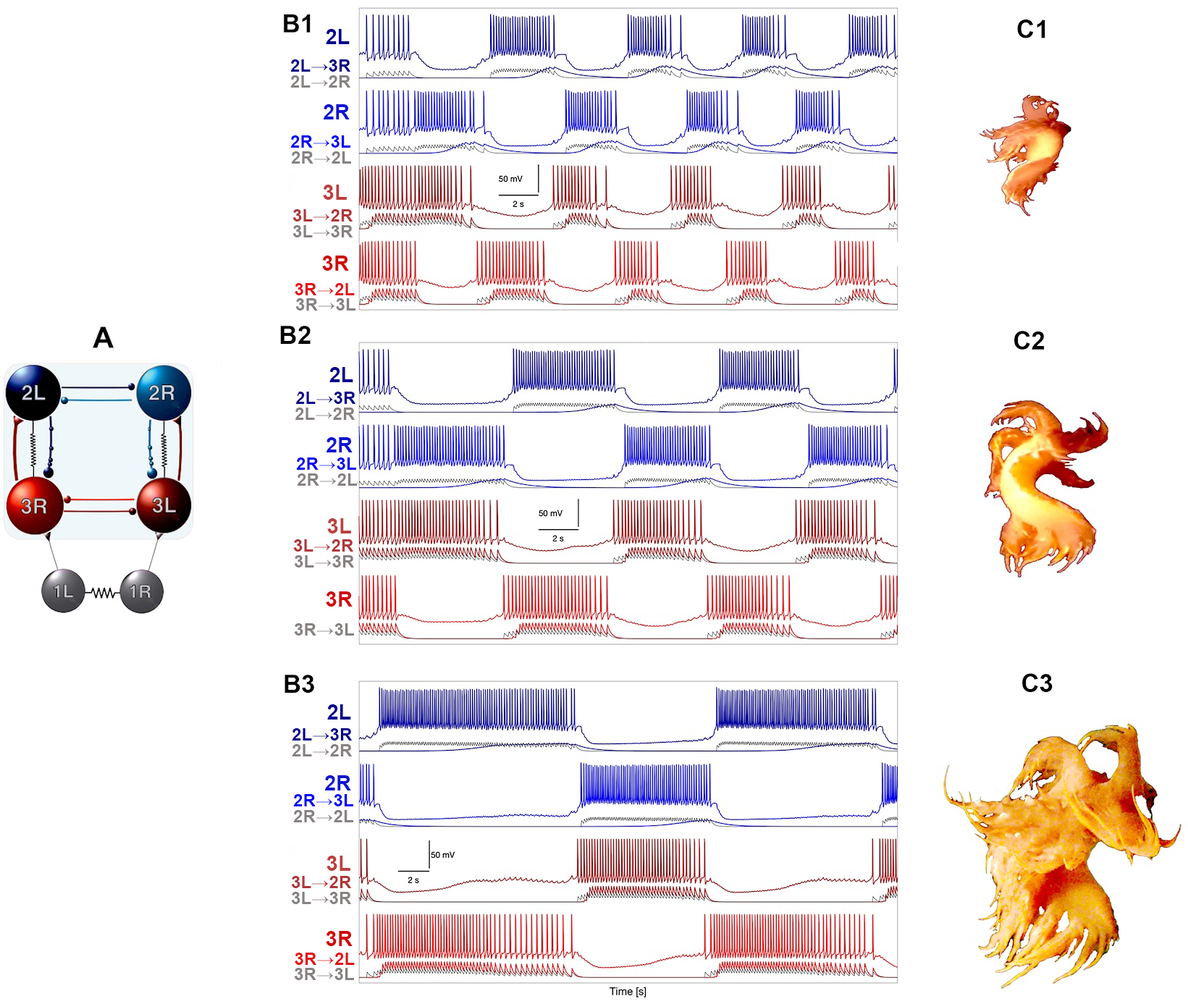
<style>
.page{position:relative;width:1188px;height:1004px;background:#ffffff}
.page>*{position:absolute;margin:0}
.t1{font:30.2px "Arial-BoldMT";color:#03008b;font-variant:small-caps}
.t2{font:30.2px "Arial-BoldMT";color:#878181;font-variant:small-caps}
.t3{font:30.2px "Arial-BoldMT";color:#0201f5;font-variant:small-caps}
.t4{font:30.2px "Arial-BoldMT";color:#af3738;font-variant:small-caps}
.t5{font:30.2px "Arial-BoldMT";color:#e11317;font-variant:small-caps}
.t6{font:36.2px "Arial-BoldMT";color:#02008c;font-variant:small-caps}
</style>
<div class="page">
<p class="t1" style="left:290px;top:59px;width:60px;height:13px">2L→3R</p>
<p class="t2" style="left:290px;top:75px;width:60px;height:13px">2L→2R</p>
<p class="t3" style="left:290px;top:135px;width:60px;height:13px">2R→3L</p>
<p class="t2" style="left:291px;top:151px;width:60px;height:13px">2R→2L</p>
<p class="t4" style="left:292px;top:209px;width:60px;height:12px">3L→2R</p>
<p class="t2" style="left:292px;top:225px;width:60px;height:12px">3L→3R</p>
<p class="t5" style="left:295px;top:283px;width:60px;height:12px">3R→2L</p>
<p class="t2" style="left:295px;top:298px;width:60px;height:13px">3R→3L</p>
<p class="t6" style="left:329px;top:367px;width:24px;height:15px">2L</p>
<p class="t1" style="left:295px;top:392px;width:60px;height:12px">2L→3R</p>
<p class="t2" style="left:295px;top:408px;width:60px;height:12px">2L→2R</p>
<p class="t3" style="left:296px;top:457px;width:60px;height:13px">2R→3L</p>
<p class="t2" style="left:297px;top:473px;width:60px;height:13px">2R→2L</p>
<p class="t4" style="left:293px;top:539px;width:60px;height:13px">3L→2R</p>
<p class="t2" style="left:294px;top:555px;width:60px;height:12px">3L→3R</p>
<p class="t2" style="left:294px;top:623px;width:60px;height:13px">3R→3L</p>
<p class="t1" style="left:292px;top:728px;width:60px;height:12px">2L→3R</p>
<p class="t2" style="left:292px;top:744px;width:60px;height:12px">2L→2R</p>
<p class="t3" style="left:293px;top:794px;width:60px;height:12px">2R→3L</p>
<p class="t2" style="left:293px;top:810px;width:60px;height:12px">2R→2L</p>
<p class="t4" style="left:291px;top:876px;width:60px;height:12px">3L→2R</p>
<p class="t2" style="left:291px;top:892px;width:60px;height:12px">3L→3R</p>
<p class="t5" style="left:295px;top:953px;width:60px;height:12px">3R→2L</p>
<p class="t2" style="left:294px;top:968px;width:60px;height:12px">3R→3L</p>
</div>
